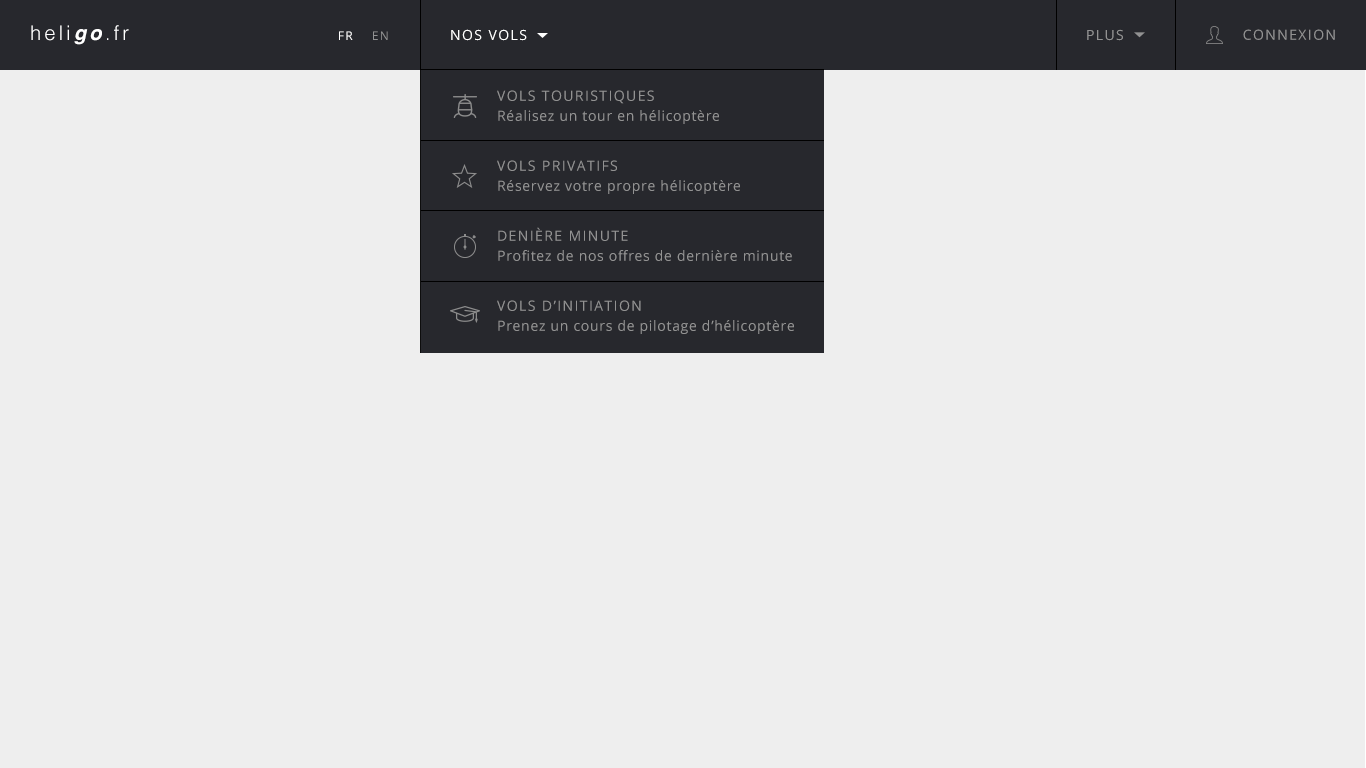
<style>
.page{position:relative;width:1366px;height:768px;background:#eeeeee}
.page>*{position:absolute;margin:0}
.t1{font:20px "Helvetica-Light";letter-spacing:0.16em;color:#ffffff}
.t2{font:20px "Helvetica-BoldOblique";letter-spacing:0.16em;color:#ffffff}
.t3{font:14px "OpenSans";letter-spacing:0.1em;color:#ffffff;text-transform:uppercase}
.t4{font:14px "OpenSans";letter-spacing:0.1em;color:#929292;text-transform:uppercase}
.t5{font:12px "OpenSans";letter-spacing:0.1em;color:#ffffff;text-transform:uppercase}
.t6{font:12px "OpenSans";letter-spacing:0.1em;color:#929292;text-transform:uppercase}
.t7{font:14px/20px "OpenSans";letter-spacing:0.05em;color:#929292}
.t8{font:14px/20px "OpenSans";letter-spacing:0.1em;color:#929292;text-transform:uppercase}
</style>
<div class="page">
<p class="t1" style="left:31px;top:25px;width:98px;height:20px">heli<span class="t2">go</span>.fr</p>
<p class="t3" style="left:451px;top:29px;width:76px;height:12px">nos vols</p>
<p class="t3" style="left:451px;top:29px;width:76px;height:12px">nos vols</p>
<p class="t4" style="left:1087px;top:29px;width:36px;height:12px">plus</p>
<p class="t4" style="left:1243px;top:29px;width:92px;height:11px">connexion</p>
<p class="t5" style="left:339px;top:31px;width:14px;height:9px">Fr</p>
<p class="t6" style="left:373px;top:31px;width:15px;height:9px">En</p>
<p class="t7" style="left:497px;top:90px;width:297px;height:244px"><span class="t8">vols touristiques<br></span>Réalisez un tour en hélicoptère<br><span class="t8">vols privatifs<br></span>Réservez votre propre hélicoptère<br><span class="t8">denière minute<br></span>Profitez de nos offres de dernière minute<br><span class="t8">vols d’initiation<br></span>Prenez un cours de pilotage d’hélicoptère</p>
</div>
